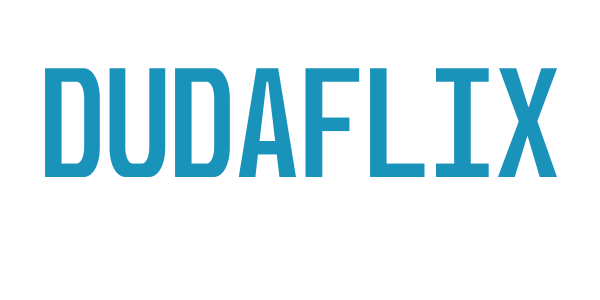
<style>
.page{position:relative;width:600px;height:300px;background:#ffffff}
.page>*{position:absolute;margin:0}
.t1{font:133.8px "Unispace-Bold";color:#1a93bb;scale:0.8 1}
</style>
<div class="page">
<p class="t1" style="left:45px;top:68px;width:513px;height:109px">DUDAFLIX</p>
</div>
